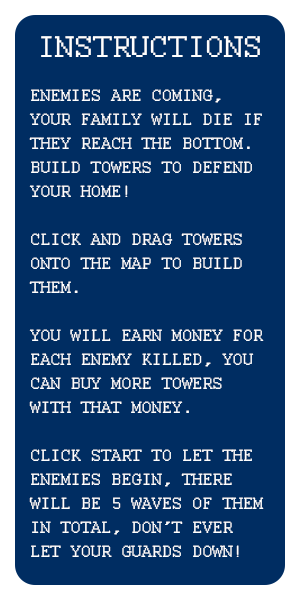
<style>
.page{position:relative;width:300px;height:600px;background:#002d62}
.page>*{position:absolute;margin:0}
.t1{font:33.3px "Courier";color:#ffffff}
.t2{font:18px/24px "Courier";color:#ffffff}
</style>
<div class="page">
<p class="t1" style="left:41px;top:36px;width:219px;height:21px">INSTRUCTIONS</p>
<p class="t2" style="left:29px;top:89px;width:235px;height:468px">ENEMIES ARE COMING, YOUR FAMILY WILL DIE IF THEY REACH THE BOTTOM. BUILD TOWERS TO DEFEND YOUR HOME! <br><br>CLICK AND DRAG TOWERS ONTO THE MAP TO BUILD THEM. <br><br>YOU WILL EARN MONEY FOR EACH ENEMY KILLED, YOU CAN BUY MORE TOWERS WITH THAT MONEY. <br><br>CLICK START TO LET THE ENEMIES BEGIN, THERE WILL BE 5 WAVES OF THEM IN TOTAL, DON’T EVER LET YOUR GUARDS DOWN!</p>
</div>
